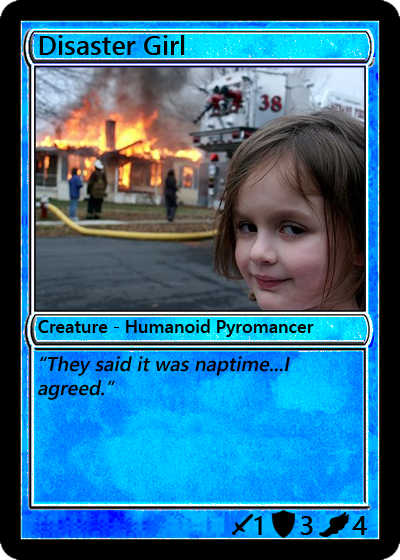
<style>
.page{position:relative;width:400px;height:560px}
.page>*{position:absolute;margin:0}
.t1{font:27px "YuGothicUI-Semibold";color:#000000}
.t2{font:18px "YuGothicUI-Semibold";color:#000000}
.t3{font:20px "YuGothicUI-Semibold";color:#000000;font-style:italic}
</style>
<div class="page">
<p class="t1" style="left:39px;top:35px;width:146px;height:20px">Disaster Girl</p>
<p class="t2" style="left:38px;top:319px;width:276px;height:18px">Creature - Humanoid Pyromancer</p>
<p class="t3" style="left:38px;top:356px;width:252px;height:44px">“They said it was naptime...I agreed.”</p>
<p class="t1" style="left:254px;top:516px;width:8px;height:19px">1</p>
<p class="t1" style="left:301px;top:516px;width:12px;height:19px">3</p>
<p class="t1" style="left:352px;top:516px;width:15px;height:19px">4</p>
</div>
